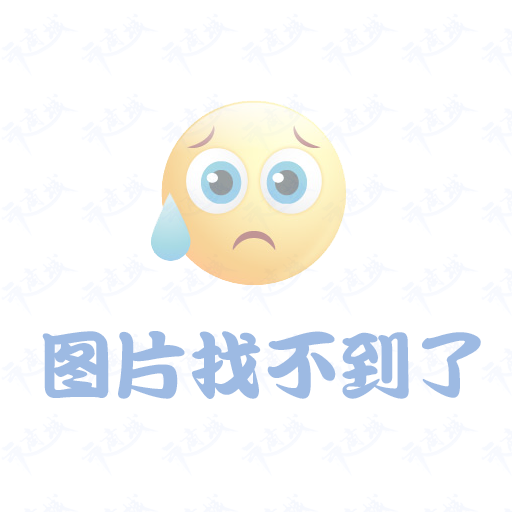
<style>
.page{position:relative;width:512px;height:512px;background:#ffffff}
.page>*{position:absolute;margin:0}
.t1{font:75px "DFPKanTingLiuW9";color:#9dbae3}
</style>
<div class="page">
<p class="t1" style="left:42px;top:331px;width:439px;height:68px">图片找不到了</p>
</div>
